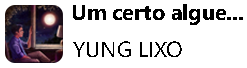
<style>
.page{position:relative;width:247px;height:68px;background:#ffffff}
.page>*{position:absolute;margin:0}
.t1{font:21.9px "SegoeUI-Bold";color:#000000}
.t2{font:22.2px "SegoeUI";color:#000000}
</style>
<div class="page">
<p class="t1" style="left:73px;top:4px;width:170px;height:21px">Um certo algue...</p>
<p class="t2" style="left:73px;top:41px;width:109px;height:16px">YUNG LIXO</p>
</div>
